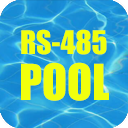
<style>
.page{position:relative;width:128px;height:128px}
.page>*{position:absolute;margin:0}
.t1{font:30px "Impact";color:#f1ff0d}
.t2{font:46px "Impact";color:#f1ff0d}
</style>
<div class="page">
<p class="t1" style="left:21px;top:29px;width:86px;height:26px">RS-485</p>
<p class="t2" style="left:21px;top:62px;width:88px;height:39px">POOL</p>
</div>
